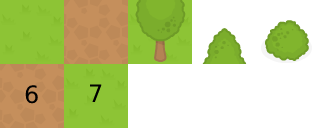
<style>
.page{position:relative;width:320px;height:128px;background:#ffffff}
.page>*{position:absolute;margin:0}
.t1{font:24px "DejaVuSans";color:#000000}
</style>
<div class="page">
<p class="t1" style="left:25px;top:85px;width:13px;height:19px">6</p>
<p class="t1" style="left:89px;top:84px;width:13px;height:18px">7</p>
</div>
